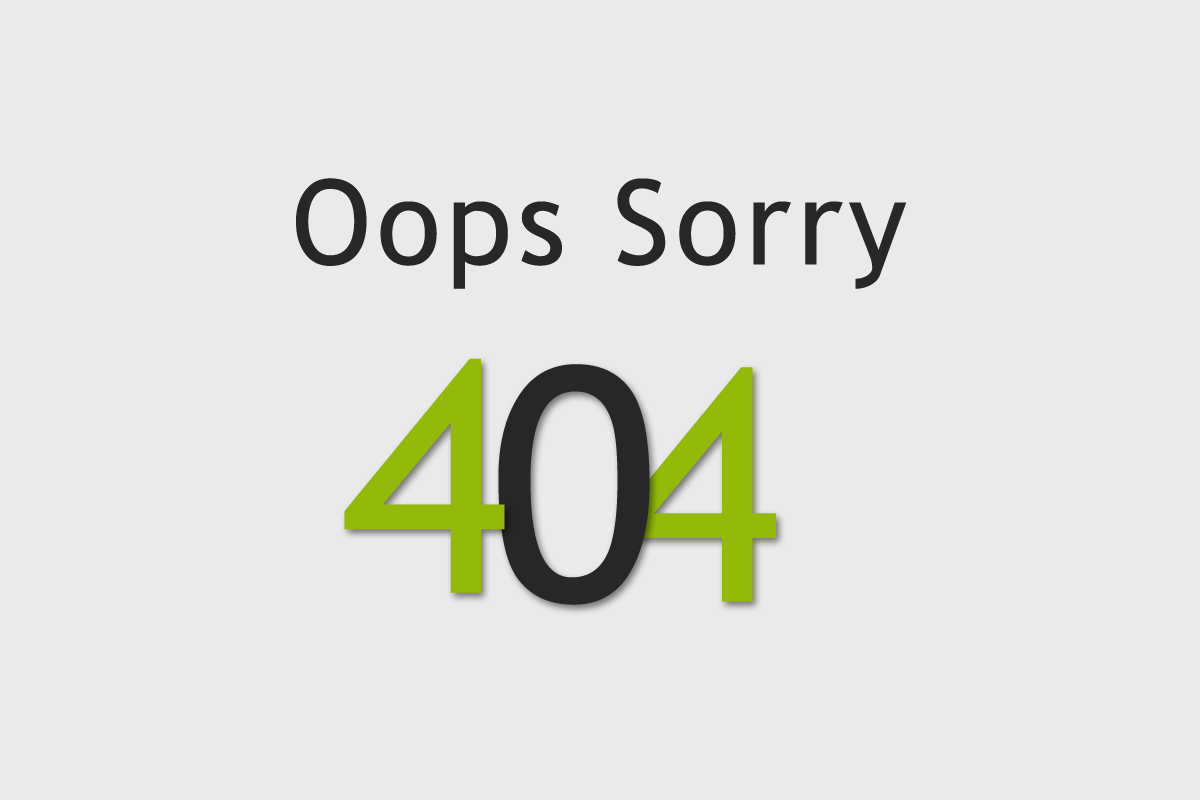
<style>
.page{position:relative;width:1200px;height:800px;background:#eaeaea}
.page>*{position:absolute;margin:0}
.t1{font:118.1px "TrebuchetMS";letter-spacing:0.05em;color:#272727}
.t2{font:325.6px "TrebuchetMS";letter-spacing:0.05em;color:#93ba09}
.t3{font:325.6px "TrebuchetMS";letter-spacing:0.05em;color:#272727}
</style>
<div class="page">
<p class="t1" style="left:296px;top:178px;width:611px;height:111px">Oops Sorry</p>
<p class="t2" style="left:344px;top:358px;width:161px;height:235px">4</p>
<p class="t3" style="left:498px;top:364px;width:152px;height:241px">0</p>
<p class="t2" style="left:616px;top:367px;width:160px;height:235px">4</p>
</div>
